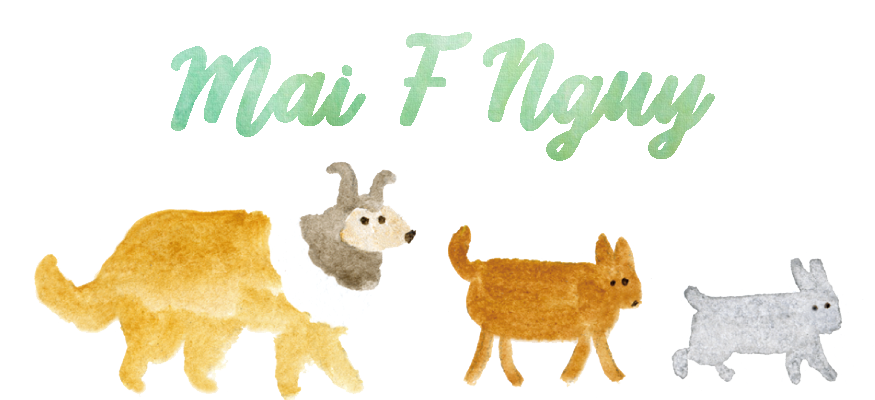
<style>
.page{position:relative;width:875px;height:400px;background:#ffffff}
.page>*{position:absolute;margin:0}
.t1{font:116.7px "Lavanda-Regular";font-weight:bold}
</style>
<div class="page">
<p class="t1" style="left:171px;top:32px;width:544px;height:129px">Mai F Nguy</p>
</div>
